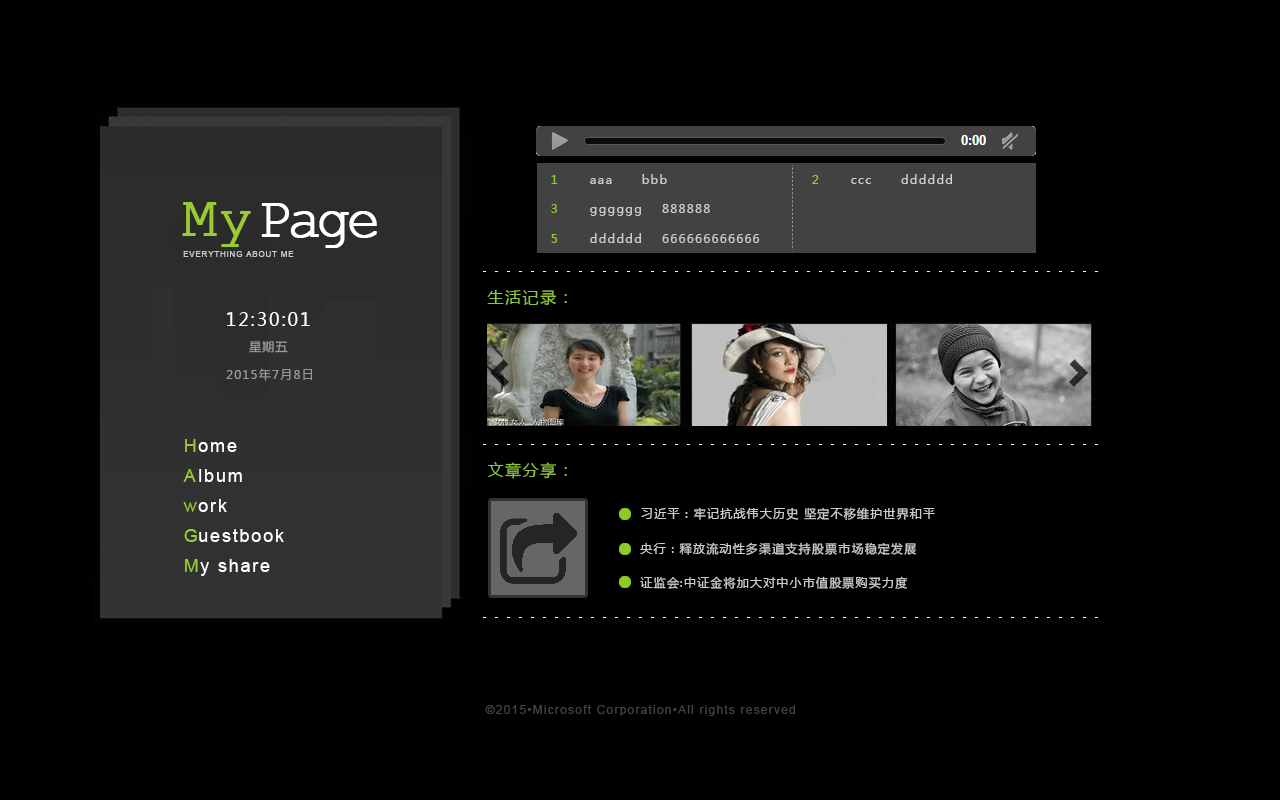
<style>
.page{position:relative;width:1280px;height:800px;background:#000000}
.page>*{position:absolute;margin:0}
.t1{font:12px "MicrosoftYaHei";letter-spacing:0.1em;color:#cccccc}
.t2{font:12px "MicrosoftYaHei";letter-spacing:0.1em;color:#90ca34}
.t3{font:56px "CourierNewPSMT";color:#99cc33;font-weight:bold}
.t4{font:56px "CourierNewPSMT";letter-spacing:-0.1em;color:#ffffff;font-weight:bold}
.t5{font:8px "ArialMT";letter-spacing:0.1em;color:#cccccc}
.t6{font:16px "MicrosoftYaHei";letter-spacing:0.1em;color:#8ec53e}
.t7{font:18px "MicrosoftYaHei";letter-spacing:0.1em;color:#ffffff}
.t8{font:12px "MicrosoftYaHei";letter-spacing:0.1em;color:#999999}
.t9{font:18px "ArialMT";letter-spacing:0.1em;color:#99cc33}
.t10{font:18px "ArialMT";letter-spacing:0.1em;color:#ffffff}
.t11{font:12px "ArialMT";letter-spacing:0.1em;color:#424242}
</style>
<div class="page">
<p class="t1" style="left:590px;top:174px;width:77px;height:10px">aaa      bbb</p>
<p class="t1" style="left:851px;top:174px;width:101px;height:10px">ccc      dddddd</p>
<p class="t2" style="left:551px;top:175px;width:7px;height:9px">1</p>
<p class="t2" style="left:812px;top:175px;width:7px;height:9px">2</p>
<p class="t3" style="left:182px;top:202px;width:69px;height:45px">My</p>
<p class="t4" style="left:261px;top:203px;width:116px;height:45px">Page</p>
<p class="t2" style="left:551px;top:204px;width:6px;height:9px">3</p>
<p class="t1" style="left:590px;top:204px;width:120px;height:12px">gggggg    888888</p>
<p class="t1" style="left:590px;top:233px;width:170px;height:10px">dddddd    666666666666</p>
<p class="t2" style="left:551px;top:234px;width:6px;height:9px">5</p>
<p class="t5" style="left:183px;top:251px;width:111px;height:6px">EVERYTHING ABOUT ME</p>
<p class="t6" style="left:487px;top:290px;width:80px;height:15px">生活记录：</p>
<p class="t7" style="left:227px;top:312px;width:83px;height:14px">12:30:01</p>
<p class="t8" style="left:249px;top:341px;width:39px;height:12px">星期五</p>
<p class="t8" style="left:226px;top:368px;width:86px;height:13px">2015年7月8日</p>
<p class="t9" style="left:185px;top:439px;width:11px;height:13px">H</p>
<p class="t10" style="left:198px;top:442px;width:39px;height:10px">ome</p>
<p class="t6" style="left:487px;top:462px;width:80px;height:17px">文章分享：</p>
<p class="t9" style="left:183px;top:469px;width:13px;height:13px">A</p>
<p class="t10" style="left:199px;top:469px;width:43px;height:13px">lbum</p>
<p class="t9" style="left:183px;top:502px;width:14px;height:10px">w</p>
<p class="t10" style="left:198px;top:499px;width:29px;height:13px">ork</p>
<p class="t1" style="left:641px;top:507px;width:294px;height:13px">习近平：牢记抗战伟大历史 坚定不移维护世界和平</p>
<p class="t9" style="left:184px;top:529px;width:13px;height:13px">G</p>
<p class="t10" style="left:199px;top:529px;width:85px;height:13px">uestbook</p>
<p class="t1" style="left:640px;top:542px;width:276px;height:13px">央行：释放流动性多渠道支持股票市场稳定发展</p>
<p class="t9" style="left:185px;top:559px;width:13px;height:13px">M</p>
<p class="t10" style="left:200px;top:559px;width:70px;height:17px">y share</p>
<p class="t1" style="left:640px;top:576px;width:268px;height:13px">证监会:中证金将加大对中小市值股票购买力度</p>
<p class="t11" style="left:485px;top:705px;width:310px;height:11px">©2015•Microsoft Corporation•All rights reserved</p>
</div>
